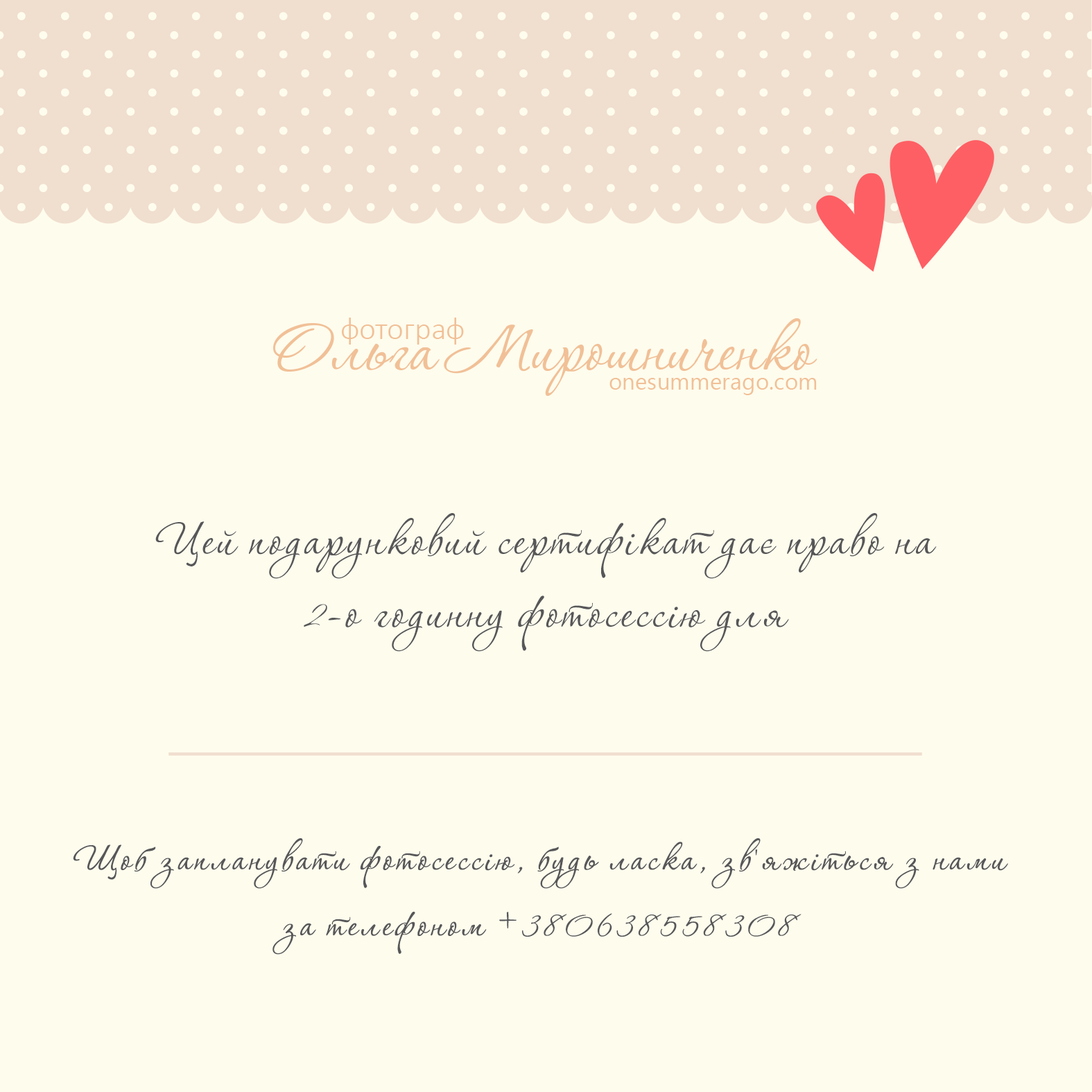
<style>
.page{position:relative;width:1092px;height:1092px;background:#fefced}
.page>*{position:absolute;margin:0}
.t1{font:31.8px "Calibri-Light";color:#f1c097}
.t2{font:86.7px "Corinthia";color:#f1c097}
.t3{font:23.1px "Ebrima";color:#f1c097}
.t4{font:60.7px "Corinthia";letter-spacing:0.045em;color:#575759}
.t5{font:46.2px "Corinthia";letter-spacing:0.045em;color:#575759;font-weight:bold}
.t6{font:49.1px "Corinthia";letter-spacing:0.045em;color:#575759;font-weight:bold}
.t7{font:54.9px "Corinthia";letter-spacing:0.045em;color:#575759;font-weight:bold}
</style>
<div class="page">
<p class="t1" style="left:342px;top:318px;width:122px;height:27px">фотограф</p>
<p class="t2" style="left:273px;top:318px;width:544px;height:78px">Ольга Мирошниченко</p>
<p class="t3" style="left:609px;top:378px;width:208px;height:17px">onesummerago.com</p>
<p class="t4" style="left:155px;top:513px;width:782px;height:139px;text-align:center">Цей подарунковий сертифікат дає право на<br>2-о годинну фотосессію для</p>
<p class="t5" style="left:73px;top:838px;width:935px;height:117px;text-align:center">Щоб запланувати фотосессію, будь ласка, зв'яжіться з нами <br>за телефоном <span class="t6">+</span><span class="t7">380638558308</span></p>
</div>
